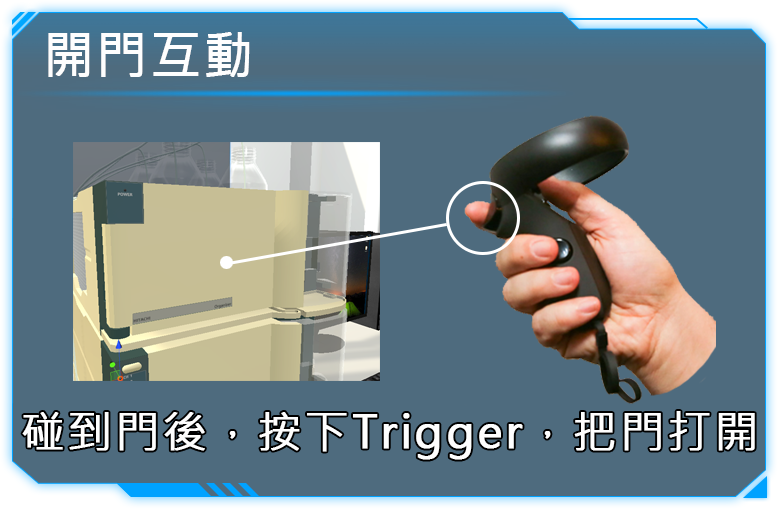
<style>
.page{position:relative;width:778px;height:509px;background:#4e6b7e}
.page>*{position:absolute;margin:0}
.t1{font:49.5px "MicrosoftJhengHeiRegular";letter-spacing:0.05em;color:#fefefe;font-weight:bold}
.t2{font:44px "MicrosoftJhengHeiRegular";letter-spacing:0.05em;color:#fefefe;font-weight:bold}
</style>
<div class="page">
<p class="t1" style="left:48px;top:32px;width:202px;height:45px">開門互動</p>
<p class="t2" style="left:22px;top:411px;width:733px;height:49px">碰到門後，按下Trigger，把門打開</p>
</div>
